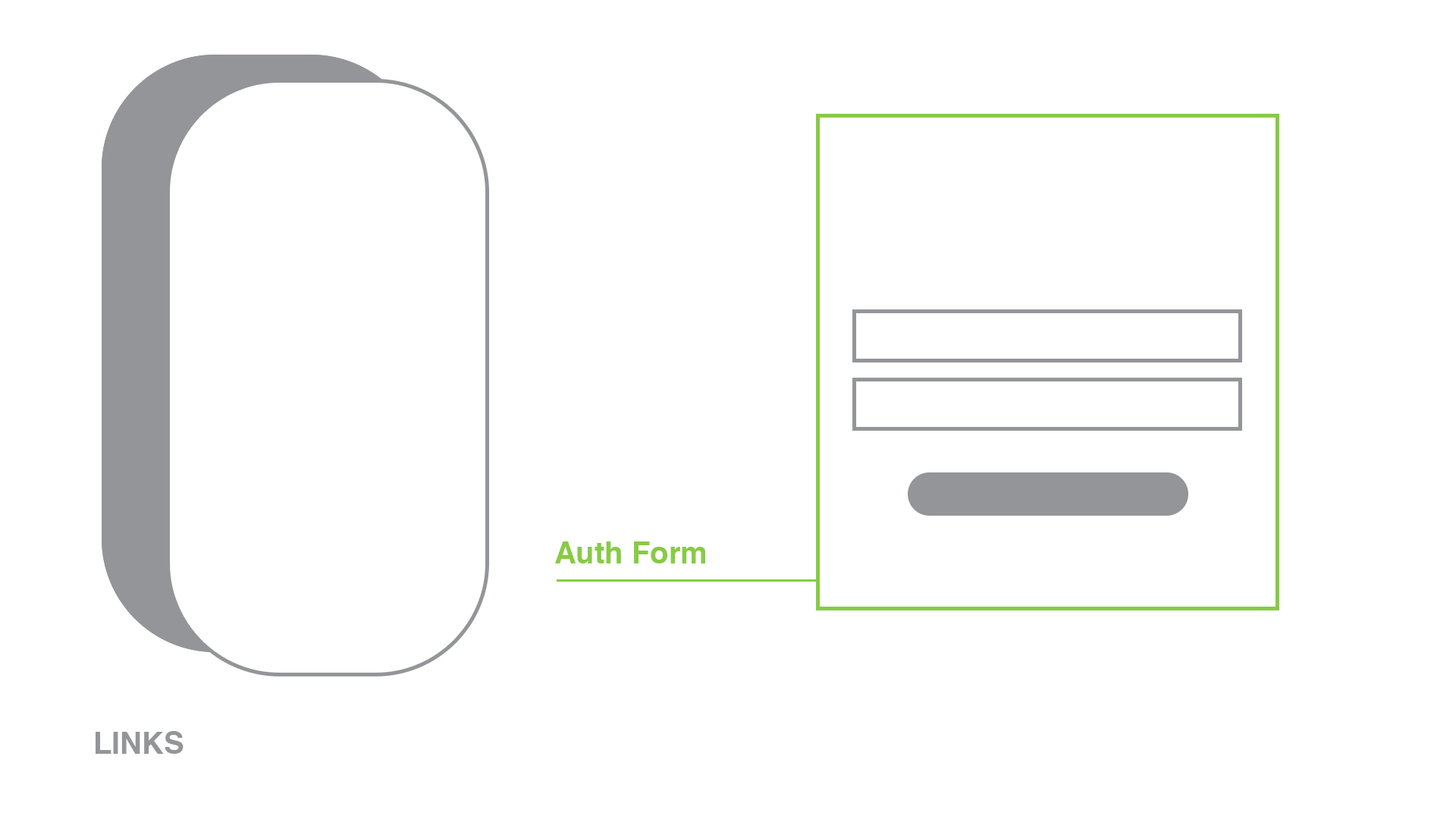
<style>
.page{position:relative;width:1456px;height:819px;background:#ffffff}
.page>*{position:absolute;margin:0}
.t1{font:30.3px "Helvetica-Bold";color:#87cb44}
.t2{font:30.3px "Helvetica-Bold";color:#949598}
</style>
<div class="page">
<p class="t1" style="left:555px;top:541px;width:150px;height:22px">Auth Form</p>
<p class="t2" style="left:96px;top:731px;width:88px;height:23px">LINKS</p>
</div>
